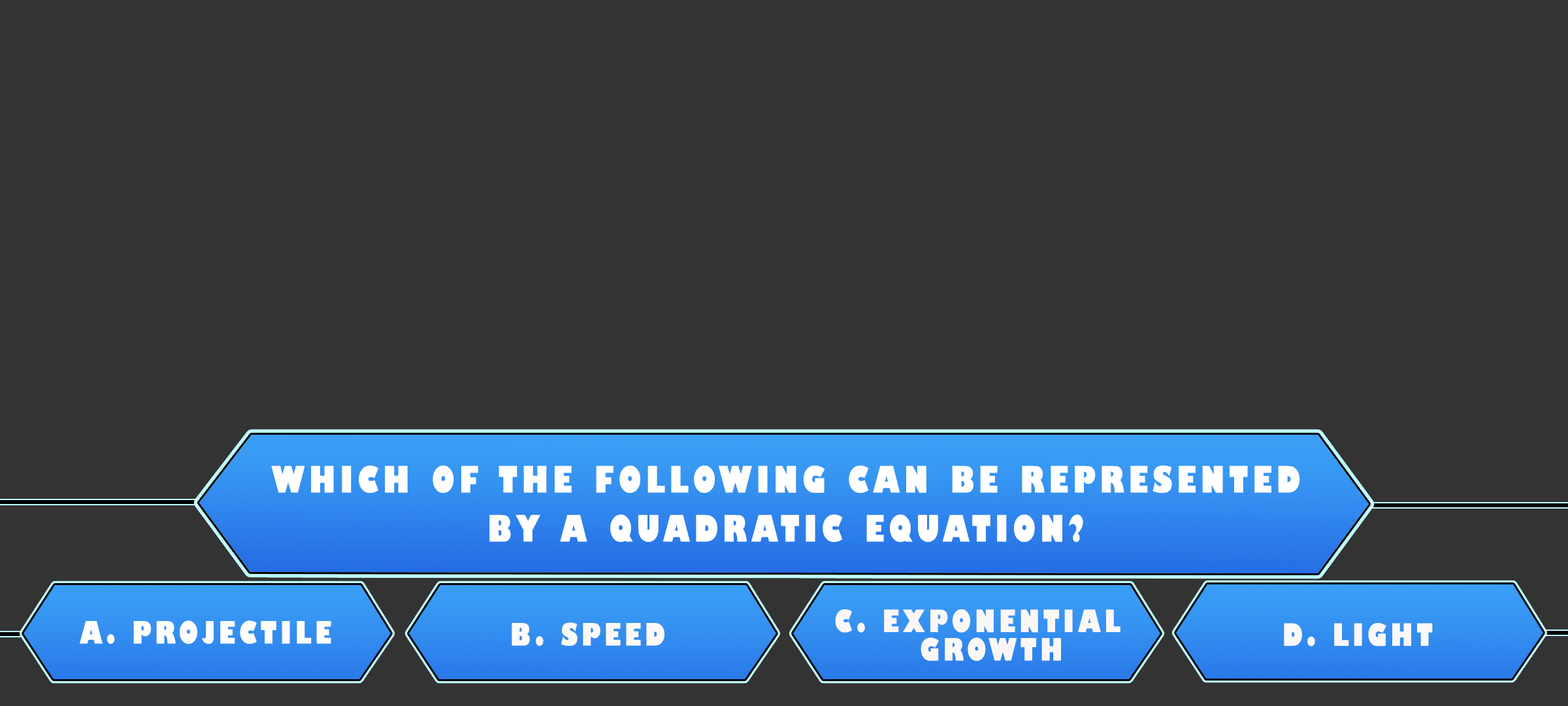
<style>
.page{position:relative;width:1568px;height:706px;background:#333333}
.page>*{position:absolute;margin:0}
.t1{font:35.4px/49px "GillSans-UltraBoldCondensed";letter-spacing:0.115em;color:#ffffff;text-transform:uppercase;scale:1.12 1}
.t2{font:29.9px/28.4px "GillSans-UltraBoldCondensed";letter-spacing:0.115em;color:#fcf7f7;text-transform:uppercase;scale:1.12 1}
.t3{font:29.9px "GillSans-UltraBoldCondensed";letter-spacing:0.115em;color:#fffefe;text-transform:uppercase;scale:1.12 1}
.t4{font:29.9px "GillSans-UltraBoldCondensed";letter-spacing:0.115em;color:#fdf9f9;text-transform:uppercase;scale:1.12 1}
.t5{font:29.9px "GillSans-UltraBoldCondensed";letter-spacing:0.115em;color:#fbf8f8;text-transform:uppercase;scale:1.12 1}
</style>
<div class="page">
<p class="t1" style="left:271px;top:465px;width:1029px;height:77px;text-align:center">Which of the following can be represented<br>by a quadratic equation?</p>
<p class="t2" style="left:835px;top:609px;width:285px;height:52px">c. Exponential<br>    growth</p>
<p class="t3" style="left:80px;top:620px;width:251px;height:24px">a. Projectile</p>
<p class="t4" style="left:512px;top:622px;width:152px;height:23px">b. speed</p>
<p class="t5" style="left:1284px;top:623px;width:149px;height:23px">d. light</p>
</div>
